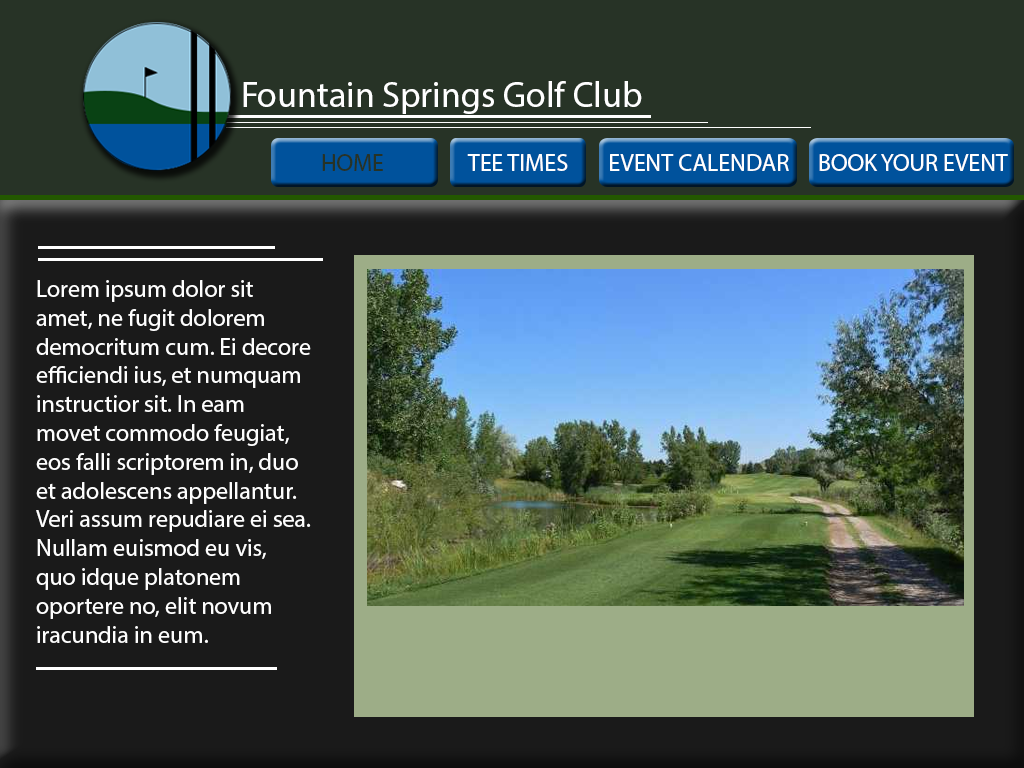
<style>
.page{position:relative;width:1024px;height:768px;background:#1a1a1a}
.page>*{position:absolute;margin:0}
.t1{font:36px "MyriadPro-Regular";color:#ffffff}
.t2{font:24px "MyriadPro-Regular";color:#273326}
.t3{font:24px "MyriadPro-Regular";color:#ffffff}
.t4{font:24px "MyriadPro-Regular";color:#fefefe}
</style>
<div class="page">
<p class="t1" style="left:243px;top:81px;width:399px;height:33px">Fountain Springs Golf Club</p>
<p class="t2" style="left:322px;top:154px;width:61px;height:17px">HOME</p>
<p class="t3" style="left:467px;top:154px;width:101px;height:17px">TEE TIMES</p>
<p class="t3" style="left:610px;top:154px;width:179px;height:17px">EVENT CALENDAR</p>
<p class="t3" style="left:819px;top:154px;width:189px;height:17px">BOOK YOUR EVENT</p>
<p class="t4" style="left:36px;top:280px;width:275px;height:363px">Lorem ipsum dolor sit amet, ne fugit dolorem democritum cum. Ei decore efficiendi ius, et numquam instructior sit. In eam movet commodo feugiat, eos falli scriptorem in, duo et adolescens appellantur. Veri assum repudiare ei sea. Nullam euismod eu vis, quo idque platonem oportere no, elit novum iracundia in eum.</p>
</div>
